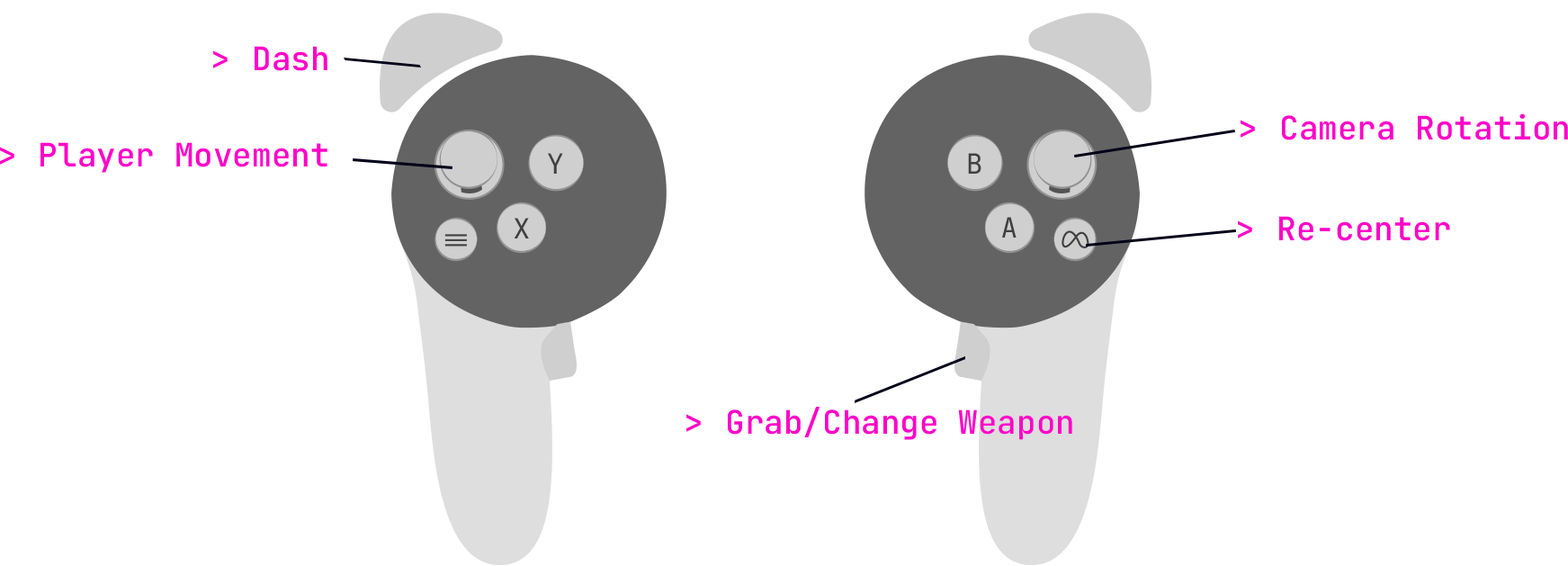
<style>
.page{position:relative;width:1568px;height:566px;background:#ffffff}
.page>*{position:absolute;margin:0}
.t1{font:32.4px "JetBrainsMonoRoman-Medium";color:#ff00c8}
</style>
<div class="page">
<p class="t1" style="left:213px;top:46px;width:114px;height:25px">Dash</p>
<p class="t1" style="left:1241px;top:113px;width:327px;height:27px">Camera Rotation</p>
<p class="t1" style="left:0px;top:142px;width:327px;height:31px">Player Movement</p>
<p class="t1" style="left:1238px;top:216px;width:212px;height:25px">Re-center</p>
<p class="t1" style="left:686px;top:407px;width:386px;height:33px">Grab/Change Weapon</p>
</div>
